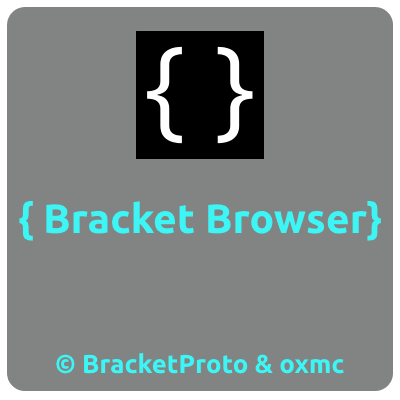
<style>
.page{position:relative;width:400px;height:400px;background:#828383}
.page>*{position:absolute;margin:0}
.t1{font:41px "Ubuntu-Bold";color:#3df5f5}
.t2{font:26px "Ubuntu-Bold";color:#3df5f5}
</style>
<div class="page">
<p class="t1" style="left:19px;top:200px;width:362px;height:41px">{ Bracket Browser}</p>
<p class="t2" style="left:56px;top:352px;width:288px;height:22px">© BracketProto &amp; oxmc</p>
</div>
